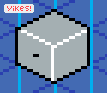
<style>
.page{position:relative;width:107px;height:93px;background:#436ab3}
.page>*{position:absolute;margin:0}
.t1{font:8px "Fontix-Regular";color:#ff444b}
</style>
<div class="page">
<p class="t1" style="left:7px;top:6px;width:24px;height:5px">Yikes!</p>
</div>
